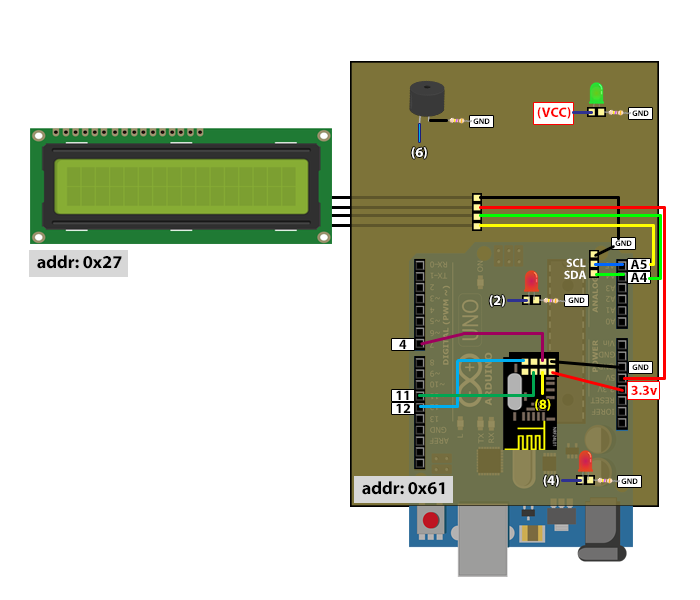
<style>
.page{position:relative;width:700px;height:600px;background:#ffffff}
.page>*{position:absolute;margin:0}
.t1{font:14px "MyriadPro-Bold";color:#ff0000}
.t2{font:14px "MyriadPro-Bold";color:#ffffff}
.t3{font:18px "MyriadPro-Bold";color:#000000}
.t4{font:12px "MyriadPro-Bold";color:#ffffff}
.t5{font:14px "MyriadPro-Bold";color:#000000}
.t6{font:14px "MyriadPro-Bold";color:#ffff00}
</style>
<div class="page">
<p class="t1" style="left:537px;top:107px;width:34px;height:12px">(VCC)</p>
<p class="t2" style="left:411px;top:147px;width:16px;height:12px">(6)</p>
<p class="t3" style="left:37px;top:255px;width:85px;height:14px">addr: 0x27</p>
<p class="t4" style="left:564px;top:270px;width:23px;height:9px">SDA</p>
<p class="t4" style="left:566px;top:258px;width:20px;height:9px">SCL</p>
<p class="t5" style="left:630px;top:259px;width:17px;height:10px">A5</p>
<p class="t5" style="left:630px;top:272px;width:17px;height:10px">A4</p>
<p class="t2" style="left:489px;top:295px;width:16px;height:12px">(2)</p>
<p class="t5" style="left:399px;top:339px;width:8px;height:10px">4</p>
<p class="t5" style="left:396px;top:390px;width:13px;height:10px">11</p>
<p class="t1" style="left:631px;top:385px;width:27px;height:10px">3.3v</p>
<p class="t6" style="left:535px;top:399px;width:16px;height:12px">(8)</p>
<p class="t5" style="left:396px;top:403px;width:15px;height:10px">12</p>
<p class="t3" style="left:362px;top:481px;width:83px;height:14px">addr: 0x61</p>
<p class="t2" style="left:543px;top:475px;width:16px;height:12px">(4)</p>
</div>
